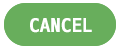
<style>
.page{position:relative;width:120px;height:50px;background:#68ae5c}
.page>*{position:absolute;margin:0}
.t1{font:20px "D2CodingBold";color:#ffffff;font-weight:bold}
</style>
<div class="page">
<p class="t1" style="left:30px;top:18px;width:62px;height:15px">CANCEL</p>
</div>
